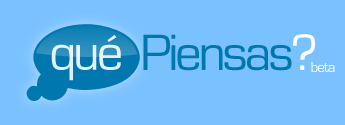
<style>
.page{position:relative;width:345px;height:125px;background:#7ac2ff}
.page>*{position:absolute;margin:0}
.t1{font:53px "EurostileRegular";letter-spacing:-0.06em;color:#e3f0f6}
.t2{font:53px "EurostileRegular";letter-spacing:-0.06em;color:#0077af}
.t3{font:53px "EurostileRegular";letter-spacing:-0.06em;color:#ffffff}
.t4{font:15px "EurostileRegular";letter-spacing:-0.06em;color:#ffffff}
</style>
<div class="page">
<p class="t1" style="left:51px;top:35px;width:70px;height:46px">qué</p>
<p class="t2" style="left:143px;top:34px;width:172px;height:37px">Piensas<span class="t3">?</span></p>
<p class="t4" style="left:311px;top:62px;width:24px;height:10px">beta</p>
</div>
